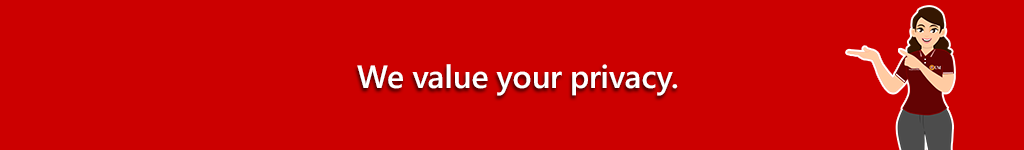
<style>
.page{position:relative;width:1024px;height:150px;background:#cc0000}
.page>*{position:absolute;margin:0}
.t1{font:32px "SegoeUI-Semibold";color:#ffffff}
</style>
<div class="page">
<p class="t1" style="left:357px;top:64px;width:321px;height:32px">We value your privacy.</p>
</div>
